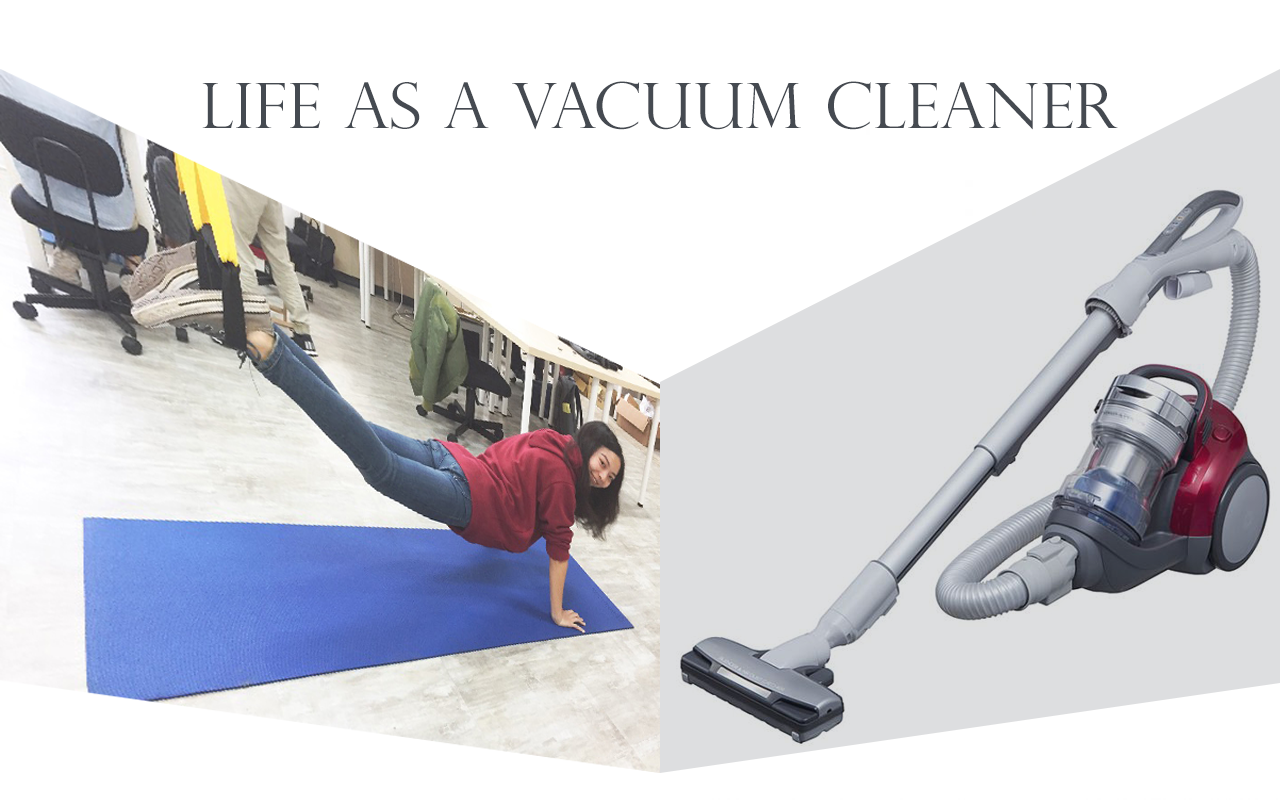
<style>
.page{position:relative;width:1280px;height:800px;background:#ffffff}
.page>*{position:absolute;margin:0}
.t1{font:62.8px "PerpetuaTitlingMT-Light";color:#454a51;scale:1.06 1}
</style>
<div class="page">
<p class="t1" style="left:202px;top:81px;width:916px;height:49px">Life as a Vacuum Cleaner</p>
</div>
